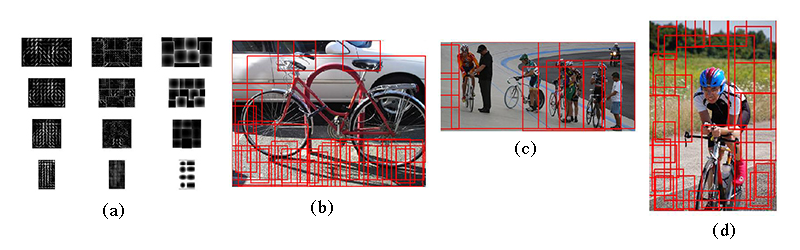
<style>
.page{position:relative;width:800px;height:250px;background:#ffffff}
.page>*{position:absolute;margin:0}
.t1{font:18px "Times-Roman";letter-spacing:0.06em;color:#000000}
</style>
<div class="page">
<p class="t1" style="left:515px;top:141px;width:21px;height:16px">(c)</p>
<p class="t1" style="left:103px;top:203px;width:21px;height:16px">(a)</p>
<p class="t1" style="left:311px;top:200px;width:22px;height:16px">(b)</p>
<p class="t1" style="left:713px;top:223px;width:22px;height:16px">(d)</p>
</div>
